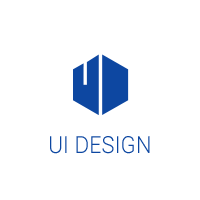
<style>
.page{position:relative;width:200px;height:200px;background:#ffffff}
.page>*{position:absolute;margin:0}
.t1{font:23.4px "Roboto-Light";color:#0d47a1;scale:0.94 1}
</style>
<div class="page">
<p class="t1" style="left:50px;top:136px;width:100px;height:18px">UI DESIGN</p>
</div>
